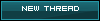
<style>
.page{position:relative;width:100px;height:21px}
.page>*{position:absolute;margin:0}
.t1{font:8px "04b08";color:#ffffff}
</style>
<div class="page">
<p class="t1" style="left:22px;top:6px;width:57px;height:5px">NEW THREAD</p>
</div>
